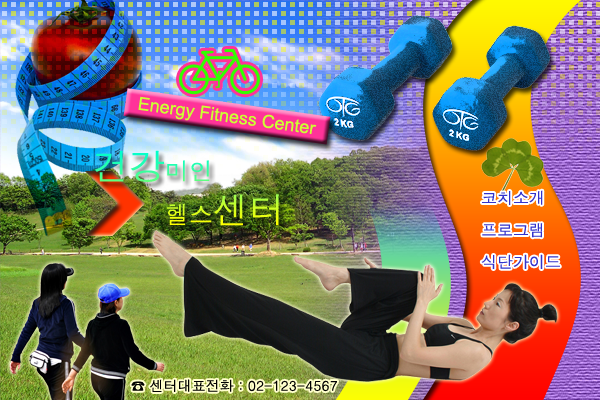
<style>
.page{position:relative;width:600px;height:400px}
.page>*{position:absolute;margin:0}
.t1{font:18px "ArialMT";color:#ccff33}
.t2{font:24px "Dotum"}
.t3{font:36px "Dotum"}
.t4{font:16px/16px "Dotum";color:#3333cb}
.t5{font:14px "Dotum";color:#000000}
</style>
<div class="page">
<p class="t1" style="left:138px;top:96px;width:179px;height:38px;rotate:8deg">Energy Fitness Center</p>
<p class="t2" style="left:94px;top:150px;width:185px;height:76px"><span class="t3">건강</span>미인<br>         헬스<span class="t3">센터</span></p>
<p class="t4" style="left:481px;top:190px;width:79px;height:79px">코치소개<br><br>프로그램<br><br>식단가이드</p>
<p class="t5" style="left:131px;top:379px;width:206px;height:13px">☎ 센터대표전화 : 02-123-4567</p>
</div>
